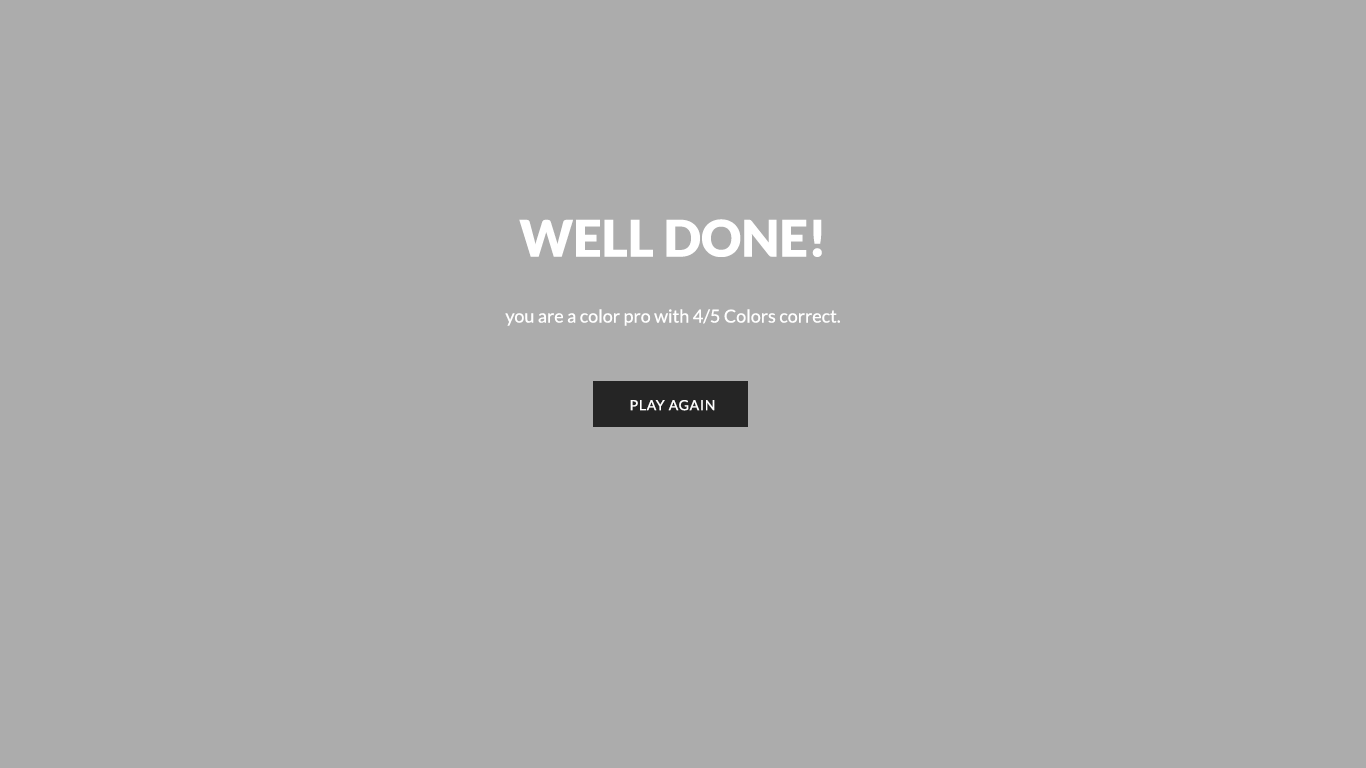
<style>
.page{position:relative;width:1366px;height:768px;background:#acacac}
.page>*{position:absolute;margin:0}
.t1{font:18px/36px "Lato-Regular";color:#ffffff}
.t2{font:50.4px/36px "Lato-Black";color:#ffffff;text-transform:uppercase}
.t3{font:14px "Lato-Regular";letter-spacing:0.05em;color:#ffffff;text-transform:uppercase}
</style>
<div class="page">
<p class="t1" style="left:505px;top:219px;width:335px;height:107px;text-align:center"><span class="t2">Well Done!<br></span>you are a color pro with 4/5 Colors correct.<br>This is a test for those true designers out there on color theory.</p>
<p class="t3" style="left:630px;top:400px;width:85px;height:11px">Play Again</p>
</div>
